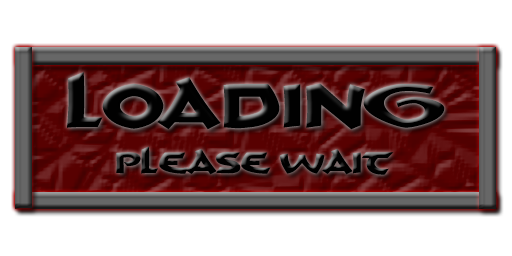
<style>
.page{position:relative;width:512px;height:256px;background:#ffffff}
.page>*{position:absolute;margin:0}
.t1{font:75px "Hyborian";color:#010101}
.t2{font:36px "Hyborian";color:#010101}
</style>
<div class="page">
<p class="t1" style="left:67px;top:72px;width:378px;height:58px">Loading</p>
<p class="t2" style="left:116px;top:146px;width:278px;height:29px">Please Wait</p>
</div>
